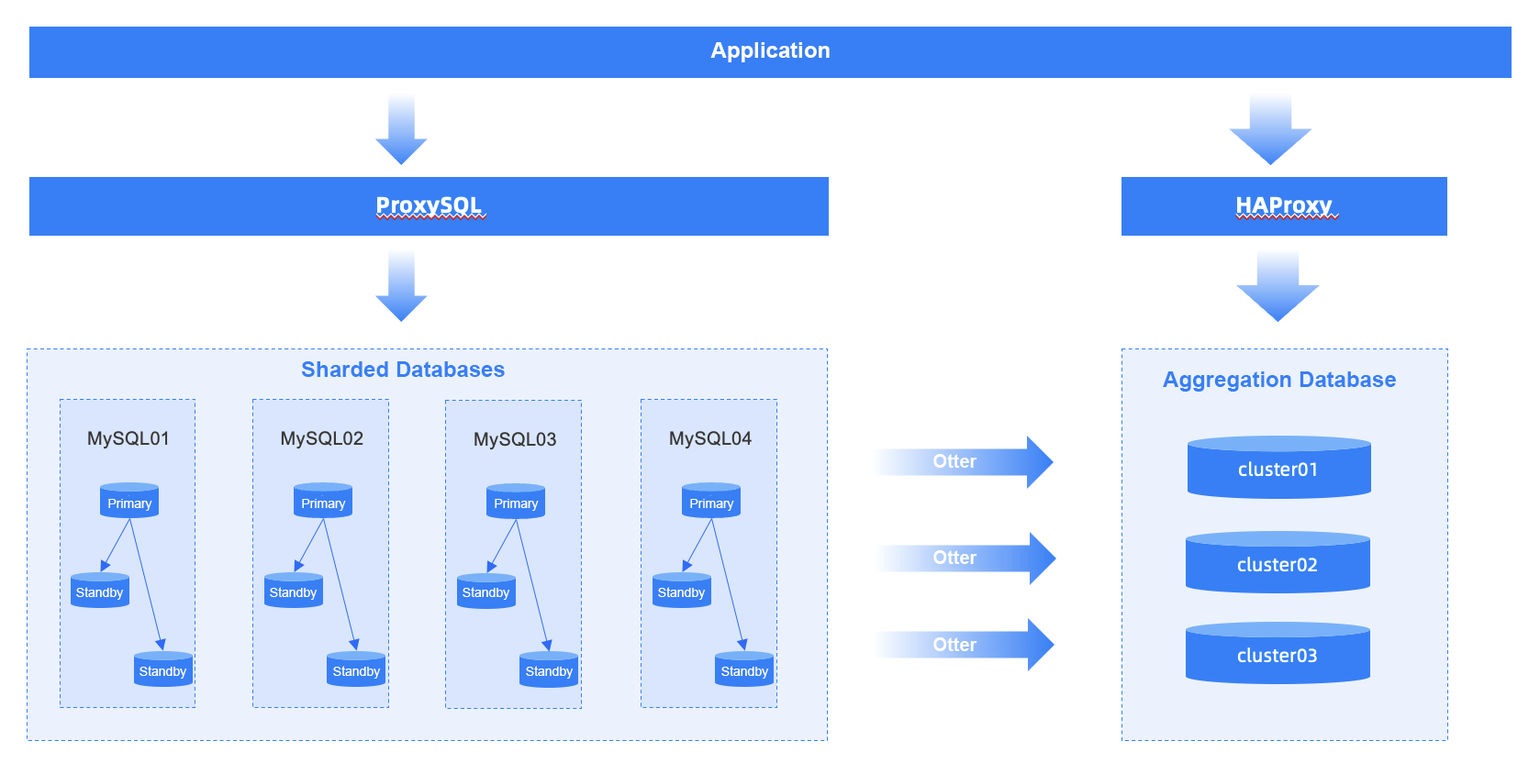
<style>
.page{position:relative;width:1540px;height:774px;background:#ffffff}
.page>*{position:absolute;margin:0}
.t1{font:22px "Arial-BoldMT";color:#ffffff}
.t2{font:11px "Arial-BoldMT";color:#387ff5}
.t3{font:11px/11px "Arial-BoldMT";color:#387ff5}
.t4{font:18.4px "Arial-BoldMT";color:#ffffff}
.t5{font:12.8px "ArialMT";color:#ffffff}
</style>
<div class="page">
<p class="t1" style="left:710px;top:42px;width:120px;height:20px">Application</p>
<p class="t2" style="left:301px;top:362px;width:204px;height:15px">Sharded Databases</p>
<p class="t3" style="left:1163px;top:372px;width:233px;height:20px;text-align:center">Aggregation Database</p>
<p class="t4" style="left:933px;top:454px;width:44px;height:14px">Otter</p>
<p class="t5" style="left:108px;top:499px;width:44px;height:12px">Primary</p>
<p class="t5" style="left:302px;top:499px;width:44px;height:12px">Primary</p>
<p class="t5" style="left:495px;top:499px;width:44px;height:12px">Primary</p>
<p class="t5" style="left:690px;top:499px;width:44px;height:12px">Primary</p>
<p class="t4" style="left:933px;top:551px;width:44px;height:13px">Otter</p>
<p class="t5" style="left:76px;top:587px;width:48px;height:13px">Standby</p>
<p class="t5" style="left:270px;top:587px;width:47px;height:13px">Standby</p>
<p class="t5" style="left:462px;top:587px;width:48px;height:13px">Standby</p>
<p class="t5" style="left:658px;top:587px;width:48px;height:13px">Standby</p>
<p class="t4" style="left:933px;top:638px;width:44px;height:13px">Otter</p>
<p class="t5" style="left:139px;top:666px;width:48px;height:13px">Standby</p>
<p class="t5" style="left:333px;top:666px;width:48px;height:13px">Standby</p>
<p class="t5" style="left:526px;top:666px;width:47px;height:13px">Standby</p>
<p class="t5" style="left:721px;top:666px;width:48px;height:13px">Standby</p>
</div>
